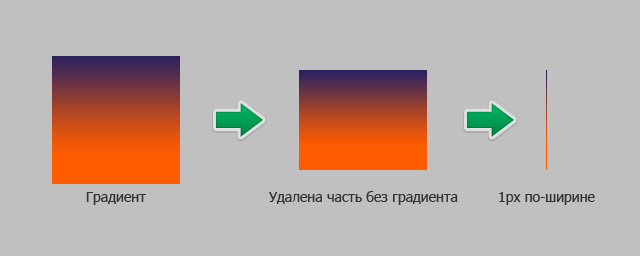
<style>
.page{position:relative;width:640px;height:256px;background:#c0c0c0}
.page>*{position:absolute;margin:0}
.t1{font:14px "Tahoma";color:#333333}
</style>
<div class="page">
<p class="t1" style="left:86px;top:192px;width:60px;height:13px">Градиент</p>
<p class="t1" style="left:269px;top:191px;width:189px;height:14px">Удалена часть без градиента</p>
<p class="t1" style="left:499px;top:192px;width:96px;height:13px">1px по-ширине</p>
</div>
